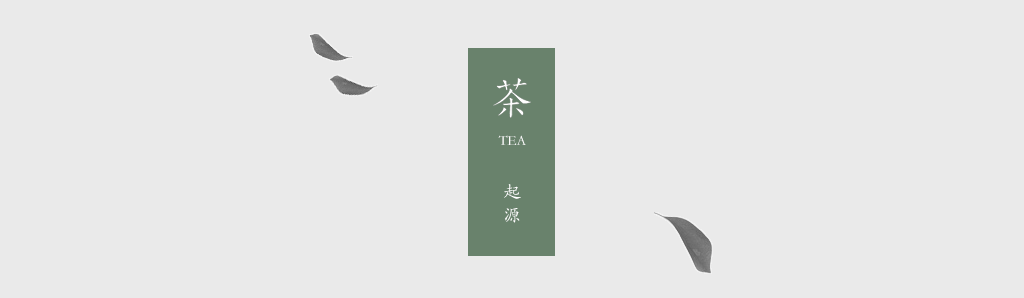
<style>
.page{position:relative;width:1024px;height:298px;background:#eaeaea}
.page>*{position:absolute;margin:0}
.t1{font:14px "STKaiti";color:#ffffff}
.t2{font:18px "STKaiti";color:#ffffff}
</style>
<div class="page">
<p class="t1" style="left:498px;top:135px;width:28px;height:10px">TEA</p>
<p class="t2" style="left:504px;top:184px;width:17px;height:39px;text-align:right">起源</p>
</div>
